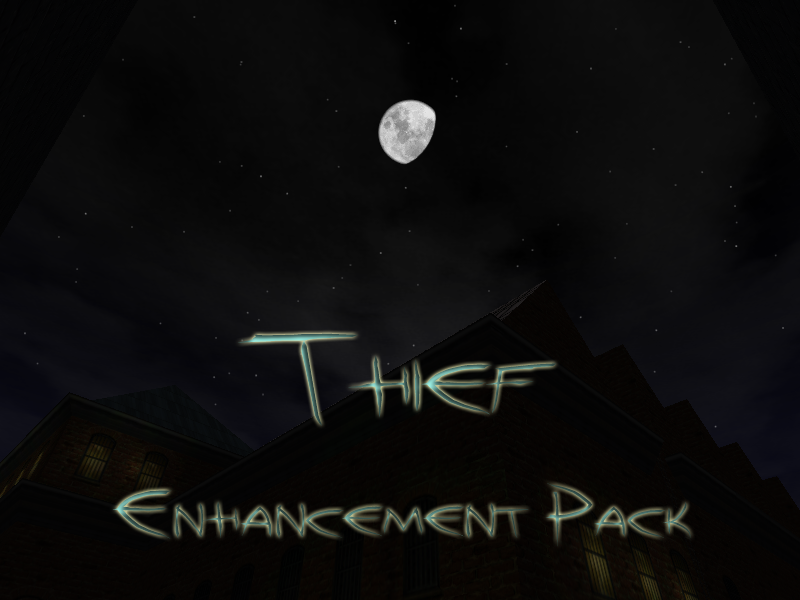
<style>
.page{position:relative;width:800px;height:600px}
.page>*{position:absolute;margin:0}
.t1{font:60.9px/121.9px "ThiefPS-BoldMT";scale:1.1 1}
.t2{font:101.6px "ThiefPS-BoldMT";scale:1.1 1}
</style>
<div class="page">
<p class="t1" style="left:112px;top:333px;width:579px;height:214px;text-align:center"><span class="t2">Thief<br></span>Enhancement Pack</p>
</div>
